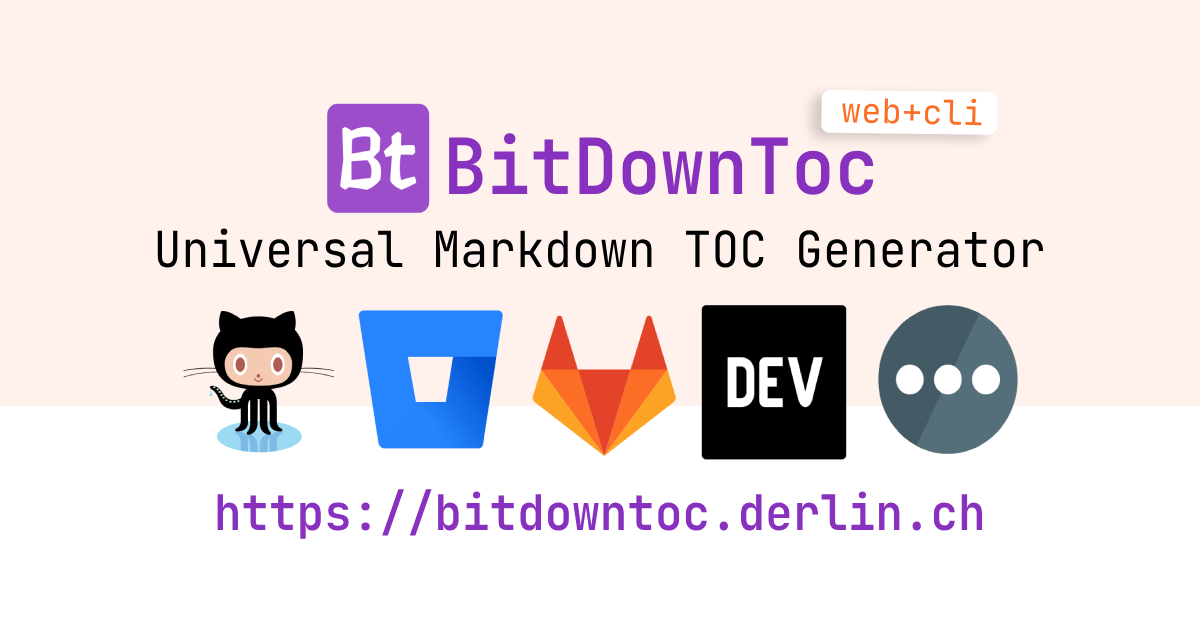
<style>
.page{position:relative;width:1200px;height:630px;background:#fff1ec}
.page>*{position:absolute;margin:0}
.t1{font:33.9px "JetBrainsMono-Regular";color:#fc6d26}
.t2{font:77.3px "JetBrainsMono-SemiBold";color:#8731be;scale:0.94 1}
.t3{font:49.6px "JetBrainsMono-Regular";color:#000000;scale:0.94 1}
.t4{font:49px "JetBrainsMono-SemiBold";color:#8731be;scale:0.94 1}
</style>
<div class="page">
<p class="t1" style="left:842px;top:98px;width:140px;height:28px;rotate:1deg">web+cli</p>
<p class="t2" style="left:449px;top:133px;width:425px;height:62px">BitDownToc</p>
<p class="t3" style="left:157px;top:228px;width:886px;height:40px">Universal Markdown TOC Generator</p>
<p class="t4" style="left:217px;top:489px;width:766px;height:50px">https://bitdowntoc.derlin.ch</p>
</div>
